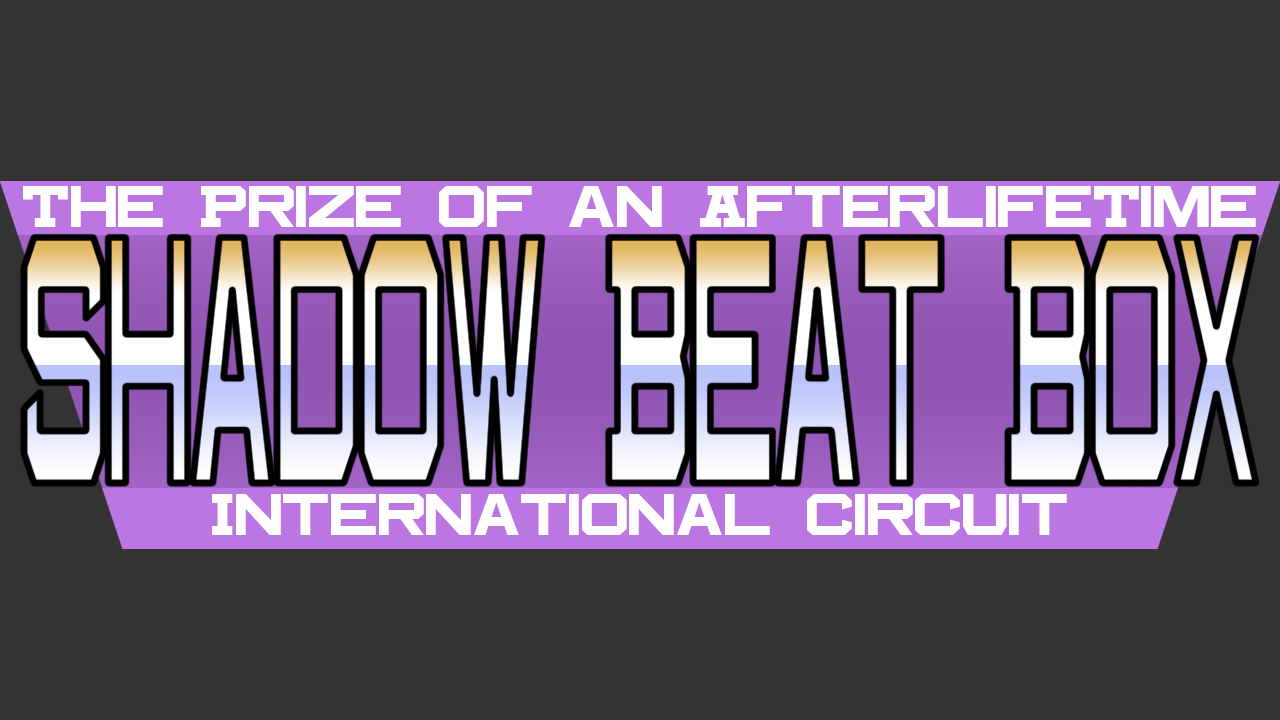
<style>
.page{position:relative;width:1280px;height:720px;background:#333333}
.page>*{position:absolute;margin:0}
.t1{font:62px "Beantown";color:#ffffff;scale:1.13 1}
.t2{font:372px "Beantown";scale:0.33 1}
</style>
<div class="page">
<p class="t1" style="left:23px;top:186px;width:1233px;height:41px">The Prize of an AfterlifeTime</p>
<p class="t2" style="left:24px;top:237px;width:1233px;height:246px">Shadow Beat Box</p>
<p class="t1" style="left:212px;top:494px;width:855px;height:41px">International Circuit</p>
</div>
